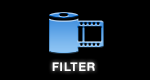
<style>
.page{position:relative;width:150px;height:80px;background:#000000}
.page>*{position:absolute;margin:0}
.t1{font:12px "AlteHaasGrotesk_Bold";letter-spacing:0.05em;color:#ffffff}
</style>
<div class="page">
<p class="t1" style="left:52px;top:62px;width:43px;height:9px">FILTER</p>
</div>
